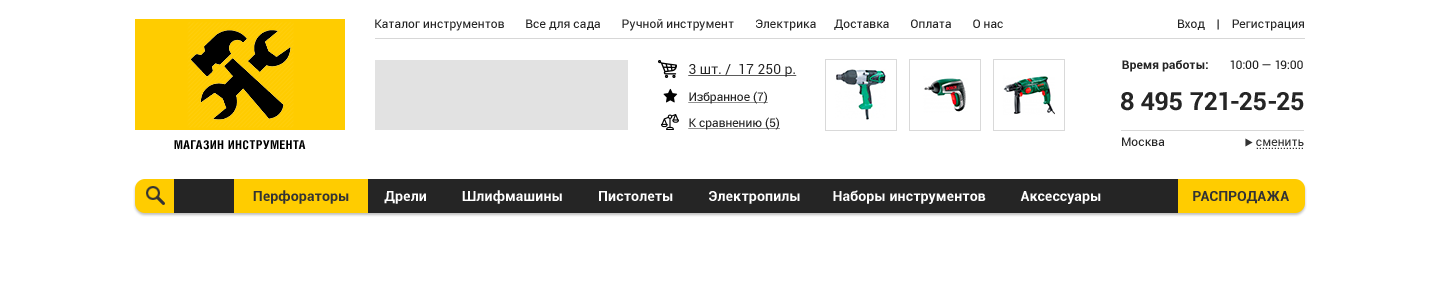
<style>
.page{position:relative;width:1440px;height:293px;background:#ffffff}
.page>*{position:absolute;margin:0}
.t1{font:12px "Roboto-Regular";color:#252525}
.t2{font:14px "Roboto-Regular";color:#252525;text-decoration:underline}
.t3{font:12px "Roboto-Bold";color:#252525}
.t4{font:12px "Roboto-Regular";color:#252525;text-decoration:underline}
.t5{font:25px "Roboto-Bold";color:#252525}
.t6{font:12px "HeliosCondBold";letter-spacing:0.05em;color:#000000;text-transform:uppercase}
.t7{font:12px "Roboto-Regular";color:#333333}
.t8{font:14px "Roboto-Bold";color:#ffffff}
.t9{font:14px "Roboto-Bold";color:#333333}
.t10{font:14px "Roboto-Bold";color:#333333;text-transform:uppercase}
</style>
<div class="page">
<p class="t1" style="left:375px;top:19px;width:628px;height:12px">Каталог инструментов       Все для сада       Ручной инструмент       Электрика      Доставка       Оплата       О нас</p>
<p class="t1" style="left:1178px;top:19px;width:126px;height:12px">Вход    |    Регистрация</p>
<p class="t2" style="left:688px;top:64px;width:109px;height:13px">3 шт. /  17 250 р.</p>
<p class="t3" style="left:1122px;top:60px;width:181px;height:12px">Время работы:<span class="t1">       10:00 — 19:00</span></p>
<p class="t4" style="left:688px;top:91px;width:80px;height:13px">Избранное (7)</p>
<p class="t5" style="left:1121px;top:92px;width:183px;height:19px">8 495 721-25-25</p>
<p class="t4" style="left:688px;top:117px;width:92px;height:13px">К сравнению (5)</p>
<p class="t1" style="left:1122px;top:137px;width:43px;height:9px">Москва</p>
<p class="t6" style="left:174px;top:140px;width:132px;height:10px">магазин инструмента</p>
<p class="t7" style="left:1256px;top:139px;width:48px;height:7px">сменить</p>
<p class="t7" style="left:1256px;top:147px;width:47px;height:2px">................</p>
<p class="t8" style="left:253px;top:190px;width:848px;height:14px"><span class="t9">Перфораторы</span>          Дрели          Шлифмашины          Пистолеты          Электропилы         Наборы инструментов          Аксессуары</p>
<p class="t10" style="left:1193px;top:191px;width:96px;height:13px">Распродажа</p>
</div>
